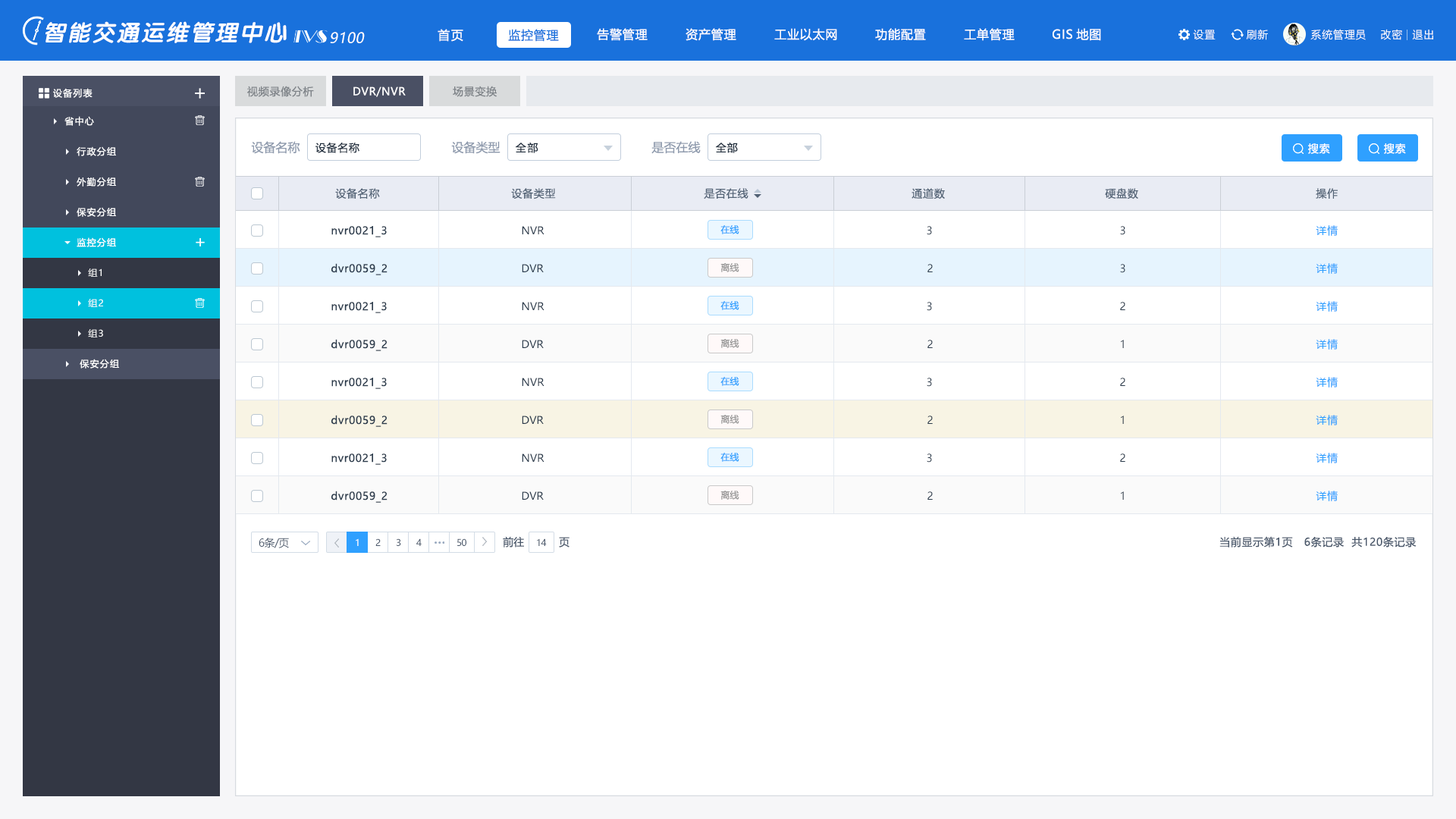
<style>
.page{position:relative;width:1456px;height:819px;background:#ffffff}
.page>*{position:absolute;margin:0}
.t1{font:22.7px "VeraSansYuanTiMono-BoldItalic";letter-spacing:0.08em;color:#ffffff}
.t2{font:12.1px "MicrosoftYaHei";letter-spacing:0.1em;color:#fefeff}
.t3{font:12.1px "MicrosoftYaHei";letter-spacing:0.05em;color:#1971dc}
.t4{font:12.1px "MicrosoftYaHei";letter-spacing:0.05em;color:#ffffff}
.t5{font:10.6px "MicrosoftYaHei";letter-spacing:0.05em;color:#ffffff}
.t6{font:14.2px "MicrosoftYaHei";letter-spacing:0.03em;color:#ffffff;font-style:italic}
.t7{font:9.1px "MicrosoftYaHei";letter-spacing:0.1em;color:#ffffff}
.t8{font:10.6px "MicrosoftYaHei";letter-spacing:0.05em;color:#7e8388}
.t9{font:12.1px "MicrosoftYaHei";color:#8e9aad}
.t10{font:10.6px "MicrosoftYaHei";letter-spacing:0.05em;color:#1f2d3d}
.t11{font:10.6px "MicrosoftYaHei";letter-spacing:0.1em;color:#1f2d3d}
.t12{font:10.6px "MicrosoftYaHei";letter-spacing:0.05em;color:#fefeff}
.t13{font:10.6px "MicrosoftYaHei";letter-spacing:0.05em;color:#546477}
.t14{font:10.6px "MicrosoftYaHei";letter-spacing:0.05em;color:#2c3c4d}
.t15{font:10.6px "MicrosoftYaHei";color:#2c3c4d}
.t16{font:9.1px "MicrosoftYaHei";color:#2fa0ff}
.t17{font:10.6px "MicrosoftYaHei";letter-spacing:0.05em;color:#2fa0ff}
.t18{font:9.1px "MicrosoftYaHei";color:#989898}
.t19{font:10.6px "MicrosoftYaHei"}
.t20{font:10.6px "MicrosoftYaHei";letter-spacing:-0.05em;color:#4a586b}
.t21{font:9.1px "MicrosoftYaHei";letter-spacing:-0.05em}
.t22{font:9.1px "MicrosoftYaHei";letter-spacing:-0.05em;color:#4c5a6d}
.t23{font:10.6px "MicrosoftYaHei";color:#4a586b}
.t24{font:10.6px "MicrosoftYaHei";letter-spacing:0.05em;color:#4a586b}
</style>
<div class="page">
<p class="t1" style="left:45px;top:21px;width:242px;height:22px">智能交通运维管理中心</p>
<p class="t2" style="left:438px;top:29px;width:25px;height:13px">首页</p>
<p class="t3" style="left:508px;top:29px;width:51px;height:13px">监控管理</p>
<p class="t4" style="left:597px;top:28px;width:51px;height:13px">告警管理</p>
<p class="t4" style="left:686px;top:28px;width:50px;height:13px">资产管理</p>
<p class="t4" style="left:774px;top:28px;width:63px;height:13px">工业以太网</p>
<p class="t4" style="left:875px;top:28px;width:51px;height:13px">功能配置</p>
<p class="t4" style="left:964px;top:28px;width:51px;height:13px">工单管理</p>
<p class="t4" style="left:1053px;top:28px;width:48px;height:13px">GIS地图</p>
<p class="t5" style="left:1193px;top:30px;width:23px;height:10px">设置</p>
<p class="t5" style="left:1246px;top:29px;width:22px;height:11px">刷新</p>
<p class="t5" style="left:1310px;top:29px;width:56px;height:11px">系统管理员</p>
<p class="t5" style="left:1381px;top:29px;width:21px;height:11px">改密</p>
<p class="t5" style="left:1412px;top:30px;width:21px;height:10px">退出</p>
<p class="t6" style="left:330px;top:32px;width:35px;height:11px">9100</p>
<p class="t7" style="left:53px;top:88px;width:40px;height:10px">设备列表</p>
<p class="t8" style="left:247px;top:86px;width:67px;height:11px">视频录像分析</p>
<p class="t5" style="left:353px;top:86px;width:53px;height:11px">DVR/NVR</p>
<p class="t8" style="left:453px;top:86px;width:44px;height:11px">场景变换</p>
<p class="t7" style="left:64px;top:116px;width:30px;height:10px">省中心</p>
<p class="t7" style="left:77px;top:146px;width:39px;height:10px">行政分组</p>
<p class="t9" style="left:251px;top:141px;width:49px;height:13px">设备名称</p>
<p class="t10" style="left:315px;top:142px;width:44px;height:11px">设备名称</p>
<p class="t9" style="left:451px;top:141px;width:49px;height:13px">设备类型</p>
<p class="t11" style="left:516px;top:143px;width:22px;height:10px">全部</p>
<p class="t9" style="left:651px;top:141px;width:50px;height:13px">是否在线</p>
<p class="t10" style="left:716px;top:143px;width:22px;height:10px">全部</p>
<p class="t12" style="left:1308px;top:143px;width:22px;height:11px">搜索</p>
<p class="t12" style="left:1384px;top:143px;width:22px;height:11px">搜索</p>
<p class="t7" style="left:77px;top:177px;width:39px;height:10px">外勤分组</p>
<p class="t13" style="left:335px;top:188px;width:45px;height:11px">设备名称</p>
<p class="t13" style="left:511px;top:188px;width:45px;height:11px">设备类型</p>
<p class="t13" style="left:704px;top:188px;width:44px;height:11px">是否在线</p>
<p class="t13" style="left:912px;top:188px;width:33px;height:11px">通道数</p>
<p class="t13" style="left:1105px;top:188px;width:33px;height:11px">硬盘数</p>
<p class="t13" style="left:1316px;top:188px;width:22px;height:11px">操作</p>
<p class="t7" style="left:77px;top:207px;width:39px;height:10px">保安分组</p>
<p class="t14" style="left:331px;top:226px;width:56px;height:11px">nvr0021_3</p>
<p class="t15" style="left:522px;top:226px;width:22px;height:8px">NVR</p>
<p class="t16" style="left:720px;top:225px;width:19px;height:9px">在线</p>
<p class="t15" style="left:927px;top:226px;width:5px;height:9px">3</p>
<p class="t15" style="left:1120px;top:226px;width:5px;height:9px">3</p>
<p class="t17" style="left:1316px;top:225px;width:22px;height:11px">详情</p>
<p class="t7" style="left:77px;top:237px;width:39px;height:10px">监控分组</p>
<p class="t7" style="left:88px;top:268px;width:14px;height:9px">组1</p>
<p class="t14" style="left:331px;top:263px;width:57px;height:12px">dvr0059_2</p>
<p class="t15" style="left:522px;top:264px;width:22px;height:8px">DVR</p>
<p class="t18" style="left:720px;top:262px;width:19px;height:10px">离线</p>
<p class="t15" style="left:927px;top:264px;width:6px;height:8px">2</p>
<p class="t15" style="left:1120px;top:264px;width:5px;height:9px">3</p>
<p class="t17" style="left:1316px;top:263px;width:22px;height:11px">详情</p>
<p class="t7" style="left:88px;top:299px;width:15px;height:8px">组2</p>
<p class="t14" style="left:331px;top:302px;width:56px;height:11px">nvr0021_3</p>
<p class="t15" style="left:522px;top:302px;width:22px;height:8px">NVR</p>
<p class="t16" style="left:720px;top:301px;width:19px;height:9px">在线</p>
<p class="t15" style="left:927px;top:302px;width:5px;height:9px">3</p>
<p class="t15" style="left:1120px;top:302px;width:5px;height:8px">2</p>
<p class="t17" style="left:1316px;top:301px;width:22px;height:11px">详情</p>
<p class="t7" style="left:88px;top:329px;width:15px;height:8px">组3</p>
<p class="t14" style="left:331px;top:339px;width:57px;height:12px">dvr0059_2</p>
<p class="t15" style="left:522px;top:340px;width:22px;height:8px">DVR</p>
<p class="t18" style="left:720px;top:338px;width:19px;height:10px">离线</p>
<p class="t15" style="left:927px;top:340px;width:6px;height:8px">2</p>
<p class="t19" style="left:1121px;top:340px;width:3px;height:8px">1</p>
<p class="t17" style="left:1316px;top:339px;width:22px;height:11px">详情</p>
<p class="t7" style="left:80px;top:359px;width:39px;height:10px">保安分组</p>
<p class="t14" style="left:331px;top:378px;width:56px;height:11px">nvr0021_3</p>
<p class="t15" style="left:522px;top:378px;width:22px;height:8px">NVR</p>
<p class="t16" style="left:720px;top:377px;width:19px;height:9px">在线</p>
<p class="t15" style="left:927px;top:378px;width:5px;height:9px">3</p>
<p class="t15" style="left:1120px;top:378px;width:5px;height:8px">2</p>
<p class="t17" style="left:1316px;top:377px;width:22px;height:11px">详情</p>
<p class="t14" style="left:331px;top:415px;width:57px;height:12px">dvr0059_2</p>
<p class="t15" style="left:522px;top:416px;width:22px;height:8px">DVR</p>
<p class="t18" style="left:720px;top:414px;width:19px;height:10px">离线</p>
<p class="t15" style="left:927px;top:416px;width:6px;height:8px">2</p>
<p class="t19" style="left:1121px;top:416px;width:3px;height:8px">1</p>
<p class="t17" style="left:1316px;top:415px;width:22px;height:10px">详情</p>
<p class="t14" style="left:331px;top:453px;width:56px;height:12px">nvr0021_3</p>
<p class="t15" style="left:522px;top:453px;width:22px;height:9px">NVR</p>
<p class="t16" style="left:720px;top:453px;width:19px;height:9px">在线</p>
<p class="t15" style="left:927px;top:453px;width:5px;height:10px">3</p>
<p class="t15" style="left:1120px;top:453px;width:5px;height:9px">2</p>
<p class="t17" style="left:1316px;top:453px;width:22px;height:10px">详情</p>
<p class="t14" style="left:331px;top:491px;width:57px;height:12px">dvr0059_2</p>
<p class="t15" style="left:522px;top:491px;width:22px;height:9px">DVR</p>
<p class="t18" style="left:720px;top:490px;width:19px;height:10px">离线</p>
<p class="t15" style="left:927px;top:491px;width:6px;height:9px">2</p>
<p class="t19" style="left:1121px;top:491px;width:3px;height:9px">1</p>
<p class="t17" style="left:1316px;top:491px;width:22px;height:10px">详情</p>
<p class="t20" style="left:259px;top:538px;width:30px;height:10px">6条/页</p>
<p class="t21" style="left:356px;top:538px;width:3px;height:8px">1</p>
<p class="t22" style="left:375px;top:538px;width:6px;height:8px">2</p>
<p class="t22" style="left:396px;top:538px;width:5px;height:8px">3</p>
<p class="t22" style="left:416px;top:538px;width:6px;height:8px">4</p>
<p class="t22" style="left:457px;top:538px;width:9px;height:8px">50</p>
<p class="t23" style="left:503px;top:536px;width:21px;height:12px">前往</p>
<p class="t22" style="left:537px;top:538px;width:10px;height:8px">14</p>
<p class="t23" style="left:559px;top:537px;width:11px;height:11px">页</p>
<p class="t24" style="left:1219px;top:536px;width:198px;height:12px">当前显示第1页   6条记录  共120条记录</p>
</div>
